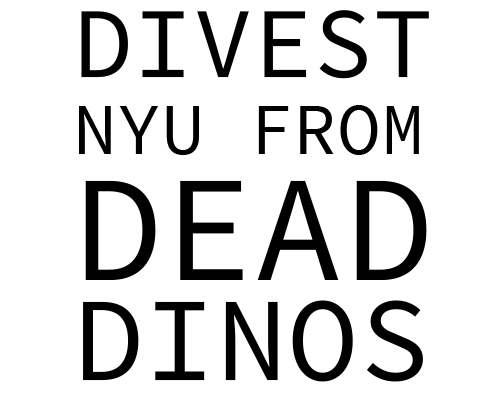
<style>
.page{position:relative;width:500px;height:399px;background:#ffffff}
.page>*{position:absolute;margin:0}
.t1{font:73.5px "SourceCodePro-Regular";color:#000000}
.t2{font:100.2px "SourceCodePro-Regular";color:#000000}
.t3{font:150.6px "SourceCodePro-Regular";color:#000000}
.t4{font:119.1px "SourceCodePro-Regular";color:#000000}
</style>
<div class="page">
<p class="t1" style="left:79px;top:10px;width:350px;height:372px"><span class="t2">DIVEST<br></span>NYU FROM<br><span class="t3">DEAD<br></span><span class="t4">DINOS</span></p>
</div>
